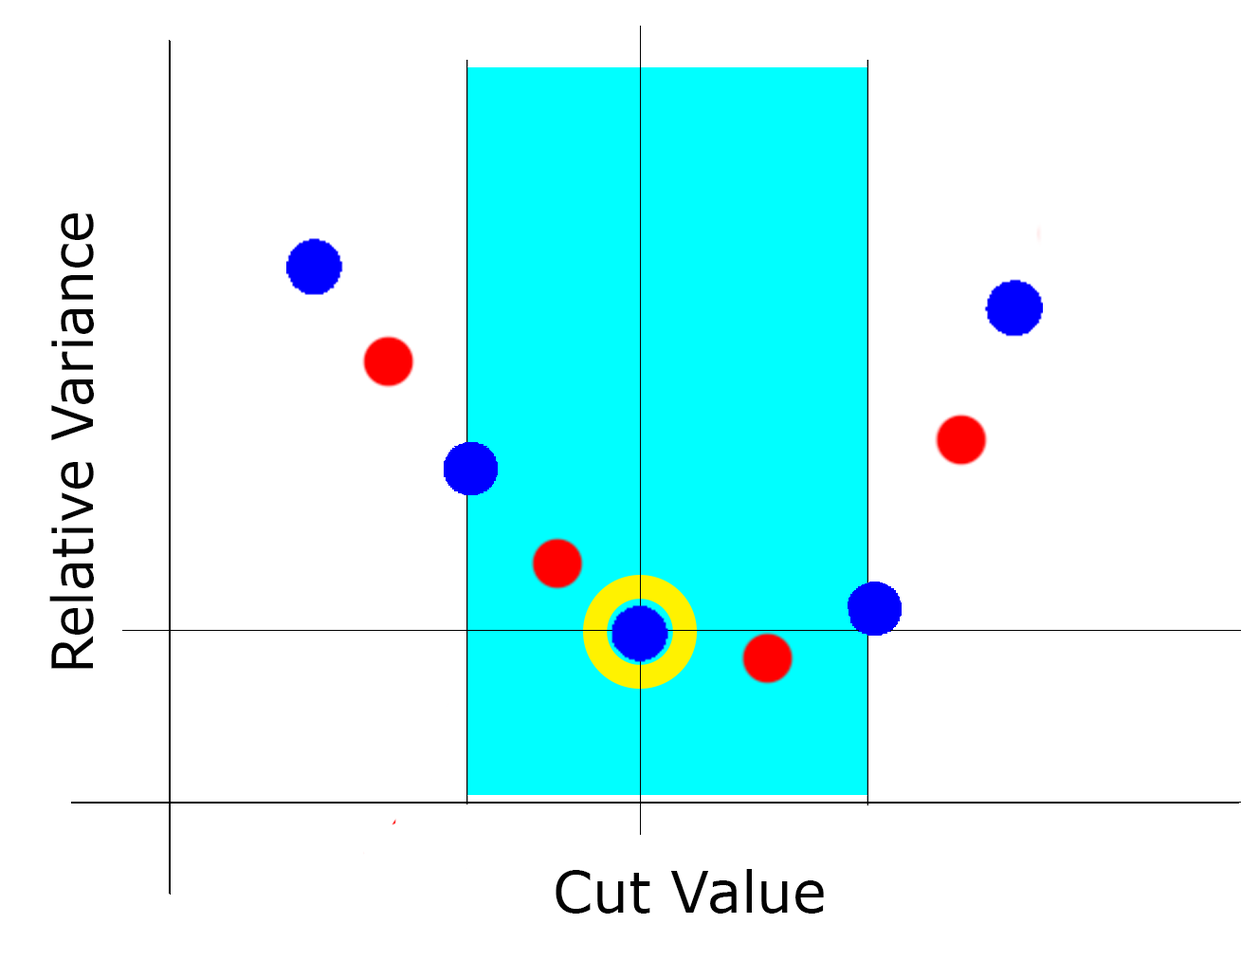
<style>
.page{position:relative;width:1241px;height:961px;background:#ffffff}
.page>*{position:absolute;margin:0}
.t1{font:56.9px "Verdana";color:#040404;scale:0.94 1}
.t2{font:56.9px "Verdana";color:#030303}
</style>
<div class="page">
<p class="t1" style="left:49px;top:213px;width:45px;height:456px;rotate:-90deg">Relative Variance</p>
<p class="t2" style="left:556px;top:869px;width:268px;height:44px">Cut Value</p>
</div>
